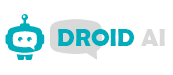
<style>
.page{position:relative;width:173px;height:75px;background:#ffffff}
.page>*{position:absolute;margin:0}
.t1{font:25px "BerlinSansFBDemi-Bold";color:#00adbc}
.t2{font:25px "BerlinSansFBDemi-Bold";color:#d9d9d9}
</style>
<div class="page">
<p class="t1" style="left:58px;top:29px;width:107px;height:17px">DROID <span class="t2">AI</span></p>
</div>
